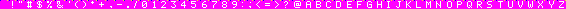
<style>
.page{position:relative;width:566px;height:9px;background:#ff00ff}
.page>*{position:absolute;margin:0}
.t1{font:8px "pixelmix";letter-spacing:-0.05em;color:#ffffff}
</style>
<div class="page">
<p class="t1" style="left:12px;top:1px;width:552px;height:7px">! " # $ % &amp; ' ( ) * + , - . / 0 1 2 3 4 5 6 7 8 9 : ; &lt; = &gt; ? @ A B C D E F G H I J K L M N O P Q R S T U V W X Y Z</p>
</div>
